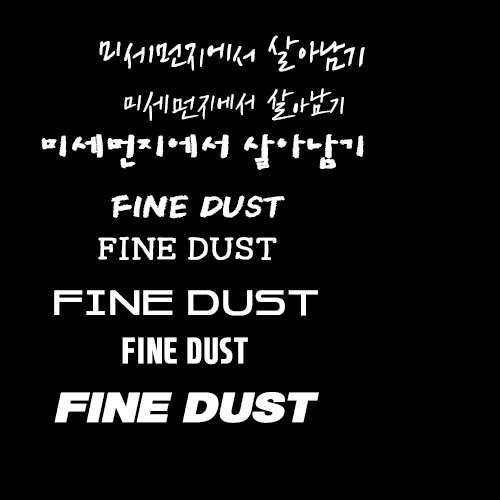
<style>
.page{position:relative;width:500px;height:500px;background:#000000}
.page>*{position:absolute;margin:0}
.t1{font:36px "SDGongMagic-aMd";color:#ffffff;font-weight:bold}
.t2{font:36px "SDGongPen-aLt";color:#ffffff;font-weight:bold}
.t3{font:36px "SDCrayon";color:#ffffff;font-weight:bold}
.t4{font:36px "GFPenSerif-Light";color:#ffffff;font-weight:bold}
.t5{font:36px "SDRotary";color:#ffffff;font-weight:bold}
.t6{font:36px "SDSwagger";color:#ffffff;font-weight:bold}
.t7{font:36px "SDPress-aOriginal";color:#ffffff;font-weight:bold}
</style>
<div class="page">
<p class="t1" style="left:99px;top:35px;width:266px;height:37px">미세먼지에서 살아남기</p>
<p class="t2" style="left:124px;top:88px;width:220px;height:33px">미세먼지에서 살아남기</p>
<p class="t3" style="left:41px;top:134px;width:323px;height:36px">미세먼지에서 살아남기</p>
<p class="t3" style="left:111px;top:194px;width:174px;height:25px">FINE DUST</p>
<p class="t4" style="left:98px;top:236px;width:179px;height:24px">FINE DUST</p>
<p class="t5" style="left:54px;top:290px;width:264px;height:26px">FINE DUST</p>
<p class="t6" style="left:122px;top:337px;width:126px;height:28px">FINE DUST</p>
<p class="t7" style="left:54px;top:392px;width:265px;height:31px">ＦINE DUST</p>
</div>
